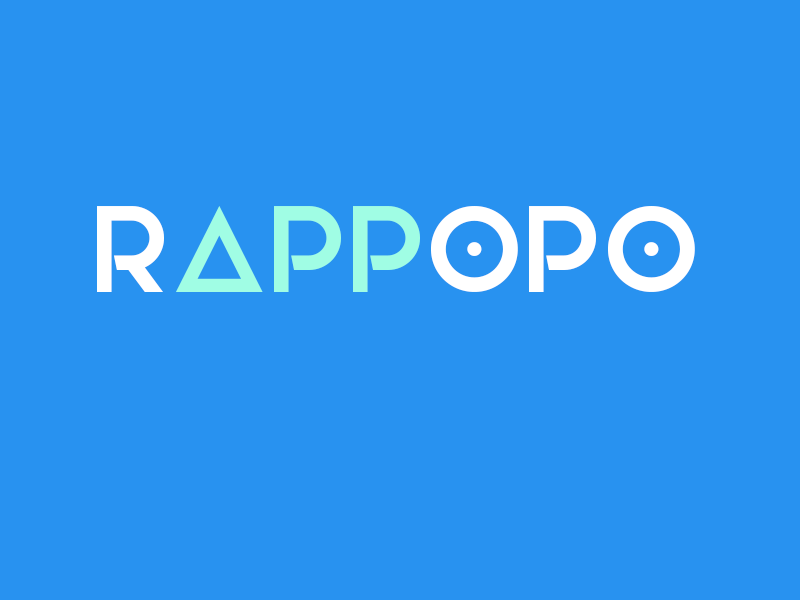
<style>
.page{position:relative;width:800px;height:600px;background:#2892f0}
.page>*{position:absolute;margin:0}
.t1{font:117.7px "Elianto-Regular";color:#a0fde4}
.t2{font:117.7px "Elianto-Regular";color:#ffffff}
</style>
<div class="page">
<p class="t1" style="left:97px;top:206px;width:598px;height:86px"><span class="t2">R</span>APP<span class="t2">OPO</span></p>
</div>
